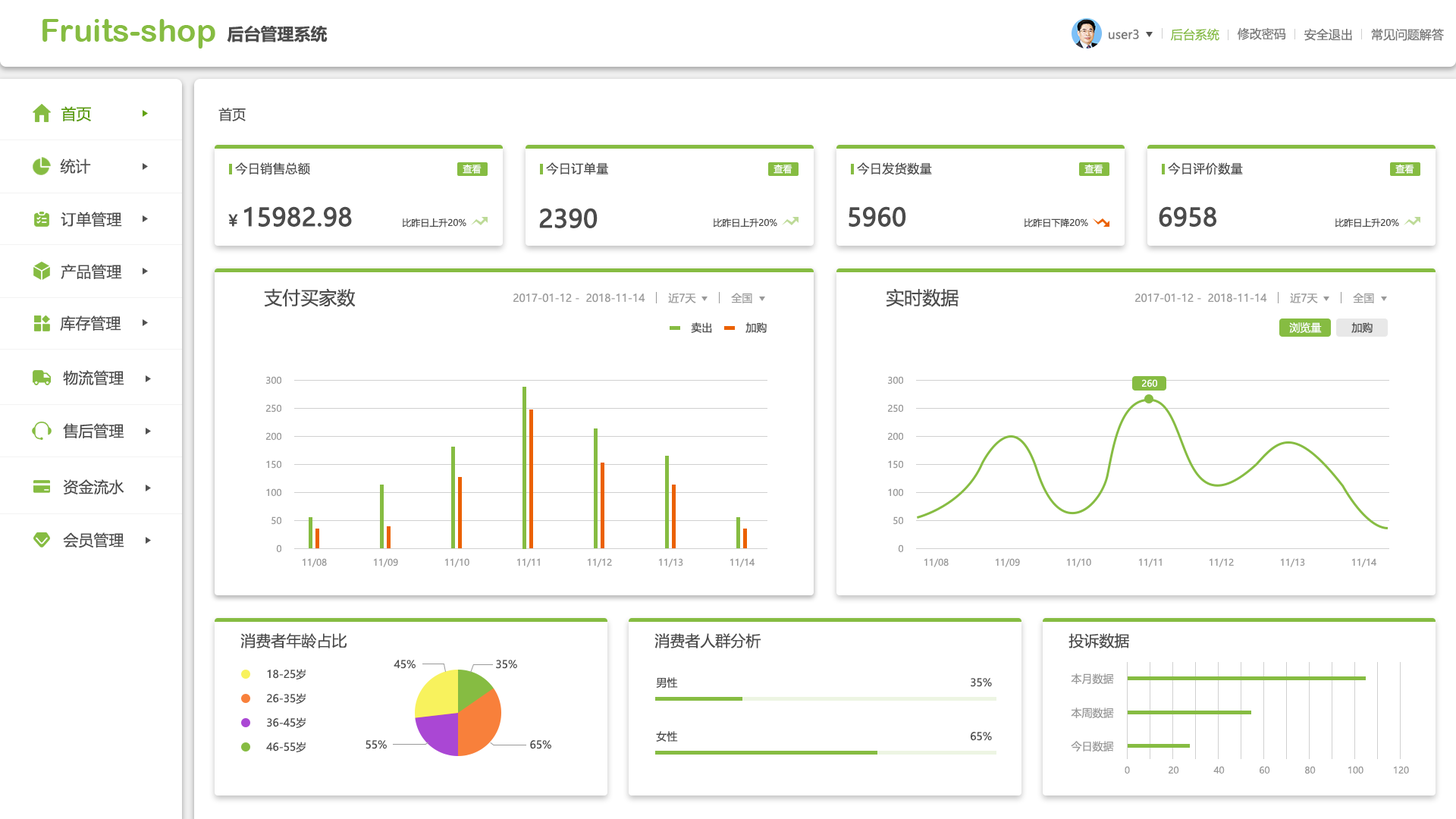
<style>
.page{position:relative;width:1456px;height:819px;background:#ffffff}
.page>*{position:absolute;margin:0}
.t1{font:16.7px "MicrosoftYaHei-Bold";color:#4b4b4b}
.t2{font:12.1px "MicrosoftYaHei";color:#777777}
.t3{font:12.1px "MicrosoftYaHei";color:#86bc42}
.t4{font:15.2px "MicrosoftYaHei";color:#599b05}
.t5{font:13.6px "MicrosoftYaHei";color:#505050}
.t6{font:15.2px "MicrosoftYaHei";color:#505050}
.t7{font:12.1px "MicrosoftYaHei";letter-spacing:0.03em;color:#4b4b4b}
.t8{font:9.1px "MicrosoftYaHei";color:#ffffff}
.t9{font:24.3px "MicrosoftYaHei";color:#4b4b4b;font-weight:bold}
.t10{font:15.2px "MicrosoftYaHei";color:#4b4b4b}
.t11{font:15.2px "MicrosoftYaHei";letter-spacing:0.03em;color:#4b4b4b;font-weight:bold}
.t12{font:9.1px "MicrosoftYaHei";color:#4b4b4b}
.t13{font:18.2px "MicrosoftYaHei";color:#4b4b4b}
.t14{font:10.6px "MicrosoftYaHei";color:#999999}
.t15{font:10.6px "MicrosoftYaHei";color:#4b4b4b}
.t16{font:10.6px "MicrosoftYaHei";color:#ffffff}
.t17{font:9.1px "MicrosoftYaHei";color:#999999}
</style>
<div class="page">
<p class="t1" style="left:227px;top:25px;width:101px;height:17px">后台管理系统</p>
<p class="t2" style="left:1109px;top:29px;width:30px;height:10px">user3</p>
<p class="t3" style="left:1170px;top:28px;width:49px;height:13px">后台系统</p>
<p class="t2" style="left:1238px;top:27px;width:48px;height:13px">修改密码</p>
<p class="t2" style="left:1304px;top:28px;width:48px;height:13px">安全退出</p>
<p class="t2" style="left:1371px;top:28px;width:73px;height:13px">常见问题解答</p>
<p class="t4" style="left:61px;top:106px;width:30px;height:16px">首页</p>
<p class="t5" style="left:218px;top:108px;width:28px;height:13px">首页</p>
<p class="t6" style="left:60px;top:158px;width:31px;height:16px">统计</p>
<p class="t7" style="left:235px;top:162px;width:75px;height:13px">今日销售总额</p>
<p class="t8" style="left:463px;top:164px;width:19px;height:10px">查看</p>
<p class="t7" style="left:546px;top:162px;width:62px;height:13px">今日订单量</p>
<p class="t8" style="left:773px;top:164px;width:19px;height:10px">查看</p>
<p class="t7" style="left:857px;top:162px;width:75px;height:13px">今日发货数量</p>
<p class="t8" style="left:1084px;top:164px;width:19px;height:10px">查看</p>
<p class="t7" style="left:1168px;top:162px;width:75px;height:13px">今日评价数量</p>
<p class="t8" style="left:1395px;top:164px;width:19px;height:10px">查看</p>
<p class="t9" style="left:244px;top:206px;width:108px;height:21px">15982.98</p>
<p class="t9" style="left:539px;top:208px;width:59px;height:20px">2390</p>
<p class="t9" style="left:849px;top:206px;width:57px;height:21px">5960</p>
<p class="t9" style="left:1159px;top:206px;width:57px;height:21px">6958</p>
<p class="t10" style="left:61px;top:212px;width:61px;height:15px">订单管理</p>
<p class="t11" style="left:228px;top:214px;width:10px;height:13px">￥</p>
<p class="t12" style="left:402px;top:218px;width:64px;height:9px">比昨日上升20%</p>
<p class="t12" style="left:713px;top:218px;width:64px;height:9px">比昨日上升20%</p>
<p class="t12" style="left:1024px;top:218px;width:64px;height:9px">比昨日下降20%</p>
<p class="t12" style="left:1335px;top:218px;width:64px;height:9px">比昨日上升20%</p>
<p class="t10" style="left:61px;top:264px;width:61px;height:15px">产品管理</p>
<p class="t13" style="left:264px;top:288px;width:92px;height:19px">支付买家数</p>
<p class="t14" style="left:513px;top:293px;width:132px;height:10px">2017-01-12 -  2018-11-14</p>
<p class="t14" style="left:668px;top:293px;width:28px;height:10px">近7天</p>
<p class="t14" style="left:731px;top:293px;width:21px;height:10px">全国</p>
<p class="t13" style="left:886px;top:288px;width:73px;height:19px">实时数据</p>
<p class="t14" style="left:1135px;top:293px;width:132px;height:10px">2017-01-12 -  2018-11-14</p>
<p class="t14" style="left:1290px;top:293px;width:28px;height:10px">近7天</p>
<p class="t14" style="left:1353px;top:293px;width:21px;height:10px">全国</p>
<p class="t10" style="left:60px;top:315px;width:61px;height:16px">库存管理</p>
<p class="t15" style="left:691px;top:322px;width:21px;height:11px">卖出</p>
<p class="t15" style="left:745px;top:322px;width:22px;height:11px">加购</p>
<p class="t16" style="left:1289px;top:322px;width:33px;height:11px">浏览量</p>
<p class="t15" style="left:1351px;top:322px;width:22px;height:11px">加购</p>
<p class="t10" style="left:63px;top:370px;width:61px;height:15px">物流管理</p>
<p class="t17" style="left:266px;top:376px;width:15px;height:8px">300</p>
<p class="t17" style="left:888px;top:376px;width:15px;height:8px">300</p>
<p class="t8" style="left:1142px;top:379px;width:15px;height:9px">260</p>
<p class="t17" style="left:266px;top:404px;width:15px;height:9px">250</p>
<p class="t17" style="left:888px;top:404px;width:15px;height:9px">250</p>
<p class="t10" style="left:63px;top:423px;width:61px;height:15px">售后管理</p>
<p class="t17" style="left:266px;top:432px;width:15px;height:9px">200</p>
<p class="t17" style="left:888px;top:432px;width:15px;height:9px">200</p>
<p class="t17" style="left:266px;top:460px;width:15px;height:9px">150</p>
<p class="t17" style="left:888px;top:460px;width:15px;height:9px">150</p>
<p class="t10" style="left:63px;top:479px;width:61px;height:16px">资金流水</p>
<p class="t17" style="left:266px;top:488px;width:15px;height:9px">100</p>
<p class="t17" style="left:888px;top:488px;width:15px;height:9px">100</p>
<p class="t17" style="left:271px;top:516px;width:10px;height:9px">50</p>
<p class="t17" style="left:893px;top:516px;width:10px;height:9px">50</p>
<p class="t10" style="left:63px;top:532px;width:61px;height:16px">会员管理</p>
<p class="t17" style="left:276px;top:544px;width:5px;height:9px">0</p>
<p class="t17" style="left:898px;top:544px;width:5px;height:9px">0</p>
<p class="t17" style="left:303px;top:558px;width:24px;height:9px">11/08</p>
<p class="t17" style="left:374px;top:558px;width:24px;height:9px">11/09</p>
<p class="t17" style="left:445px;top:558px;width:24px;height:9px">11/10</p>
<p class="t17" style="left:517px;top:558px;width:23px;height:9px">11/11</p>
<p class="t17" style="left:588px;top:558px;width:24px;height:9px">11/12</p>
<p class="t17" style="left:659px;top:558px;width:24px;height:9px">11/13</p>
<p class="t17" style="left:730px;top:558px;width:25px;height:9px">11/14</p>
<p class="t17" style="left:924px;top:558px;width:25px;height:9px">11/08</p>
<p class="t17" style="left:996px;top:558px;width:24px;height:9px">11/09</p>
<p class="t17" style="left:1067px;top:558px;width:24px;height:9px">11/10</p>
<p class="t17" style="left:1139px;top:558px;width:23px;height:9px">11/11</p>
<p class="t17" style="left:1210px;top:558px;width:24px;height:9px">11/12</p>
<p class="t17" style="left:1281px;top:558px;width:24px;height:9px">11/13</p>
<p class="t17" style="left:1352px;top:558px;width:24px;height:9px">11/14</p>
<p class="t10" style="left:240px;top:633px;width:107px;height:15px">消费者年龄占比</p>
<p class="t10" style="left:654px;top:633px;width:107px;height:15px">消费者人群分析</p>
<p class="t10" style="left:1068px;top:633px;width:61px;height:15px">投诉数据</p>
<p class="t15" style="left:394px;top:660px;width:22px;height:9px">45%</p>
<p class="t15" style="left:496px;top:660px;width:21px;height:9px">35%</p>
<p class="t15" style="left:267px;top:669px;width:39px;height:10px">18-25岁</p>
<p class="t15" style="left:656px;top:677px;width:22px;height:11px">男性</p>
<p class="t15" style="left:971px;top:678px;width:21px;height:9px">35%</p>
<p class="t14" style="left:1071px;top:673px;width:43px;height:12px">本月数据</p>
<p class="t15" style="left:267px;top:693px;width:39px;height:11px">26-35岁</p>
<p class="t14" style="left:1071px;top:708px;width:43px;height:11px">本周数据</p>
<p class="t15" style="left:267px;top:717px;width:39px;height:11px">36-45岁</p>
<p class="t15" style="left:656px;top:731px;width:22px;height:11px">女性</p>
<p class="t15" style="left:971px;top:732px;width:21px;height:9px">65%</p>
<p class="t15" style="left:266px;top:742px;width:40px;height:10px">46-55岁</p>
<p class="t15" style="left:366px;top:740px;width:21px;height:9px">55%</p>
<p class="t15" style="left:530px;top:740px;width:21px;height:9px">65%</p>
<p class="t14" style="left:1071px;top:741px;width:43px;height:11px">今日数据</p>
<p class="t17" style="left:1125px;top:766px;width:5px;height:8px">0</p>
<p class="t17" style="left:1169px;top:766px;width:10px;height:8px">20</p>
<p class="t17" style="left:1213px;top:766px;width:12px;height:8px">40</p>
<p class="t17" style="left:1260px;top:766px;width:10px;height:8px">60</p>
<p class="t17" style="left:1305px;top:766px;width:11px;height:8px">80</p>
<p class="t17" style="left:1348px;top:766px;width:15px;height:8px">100</p>
<p class="t17" style="left:1394px;top:766px;width:15px;height:8px">120</p>
</div>
